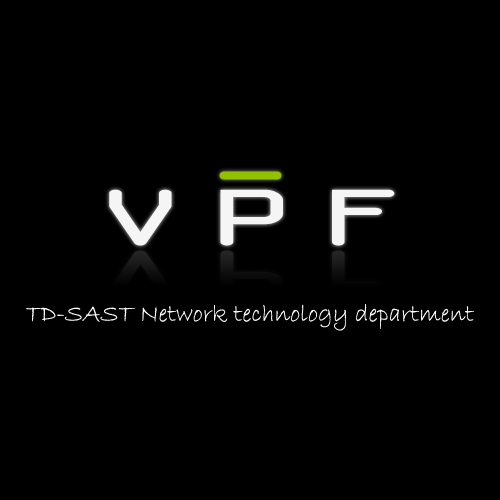
<style>
.page{position:relative;width:500px;height:500px;background:#000000}
.page>*{position:absolute;margin:0}
.t1{font:85.5px "OCRAExtended";letter-spacing:0.14em;color:#f5f5f5;scale:1.75 1}
.t2{font:25px "BradleyHandITC";color:#ffffff}
</style>
<div class="page">
<p class="t1" style="left:109px;top:189px;width:286px;height:57px">VPF</p>
<p class="t2" style="left:26px;top:304px;width:448px;height:27px">TD-SAST Network technology department</p>
</div>
